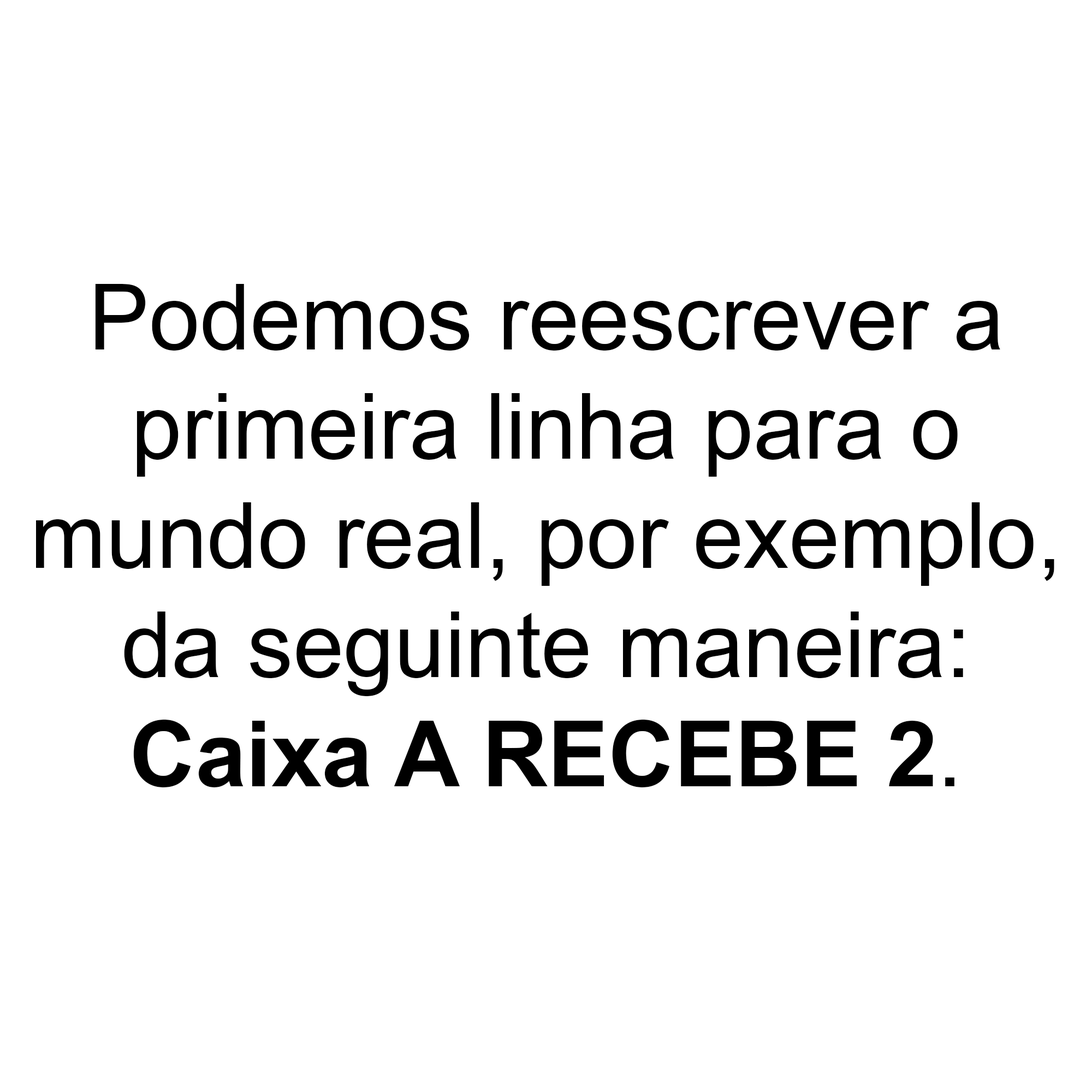
<style>
.page{position:relative;width:1092px;height:1092px;background:#ffffff}
.page>*{position:absolute;margin:0}
.t1{font:91px "ArialMT";color:#000000}
.t2{font:91px "Arial-BoldMT";color:#000000}
</style>
<div class="page">
<p class="t1" style="left:36px;top:284px;width:1018px;height:503px;text-align:center">Podemos reescrever a<br>primeira linha para o<br>mundo real, por exemplo,<br>da seguinte maneira:<br><span class="t2">Caixa A RECEBE 2</span>.</p>
</div>
